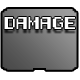
<style>
.page{position:relative;width:80px;height:80px;background:#ffffff}
.page>*{position:absolute;margin:0}
.t1{font:17px "HalfBoldPixel-7";letter-spacing:0.01em;color:#ffffff}
</style>
<div class="page">
<p class="t1" style="left:4px;top:17px;width:71px;height:12px">DAMAGE</p>
</div>
